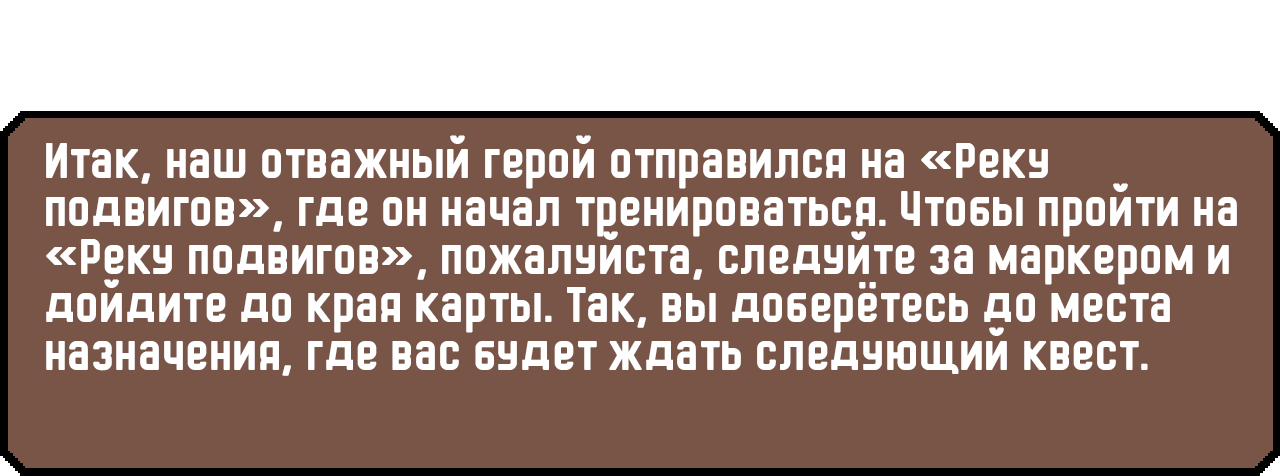
<style>
.page{position:relative;width:1280px;height:476px;background:#795548}
.page>*{position:absolute;margin:0}
.t1{font:48px/48px "HermanoMayor";color:#ffffff}
</style>
<div class="page">
<p class="t1" style="left:46px;top:135px;width:1191px;height:241px">Итак, наш отважный герой отправился на «Реку подвигов», где он начал тренироваться. Чтобы пройти на «Реку подвигов», пожалуйста, следуйте за маркером и дойдите до края карты. Так, вы доберётесь до места назначения, где вас будет ждать следующий квест.</p>
</div>
